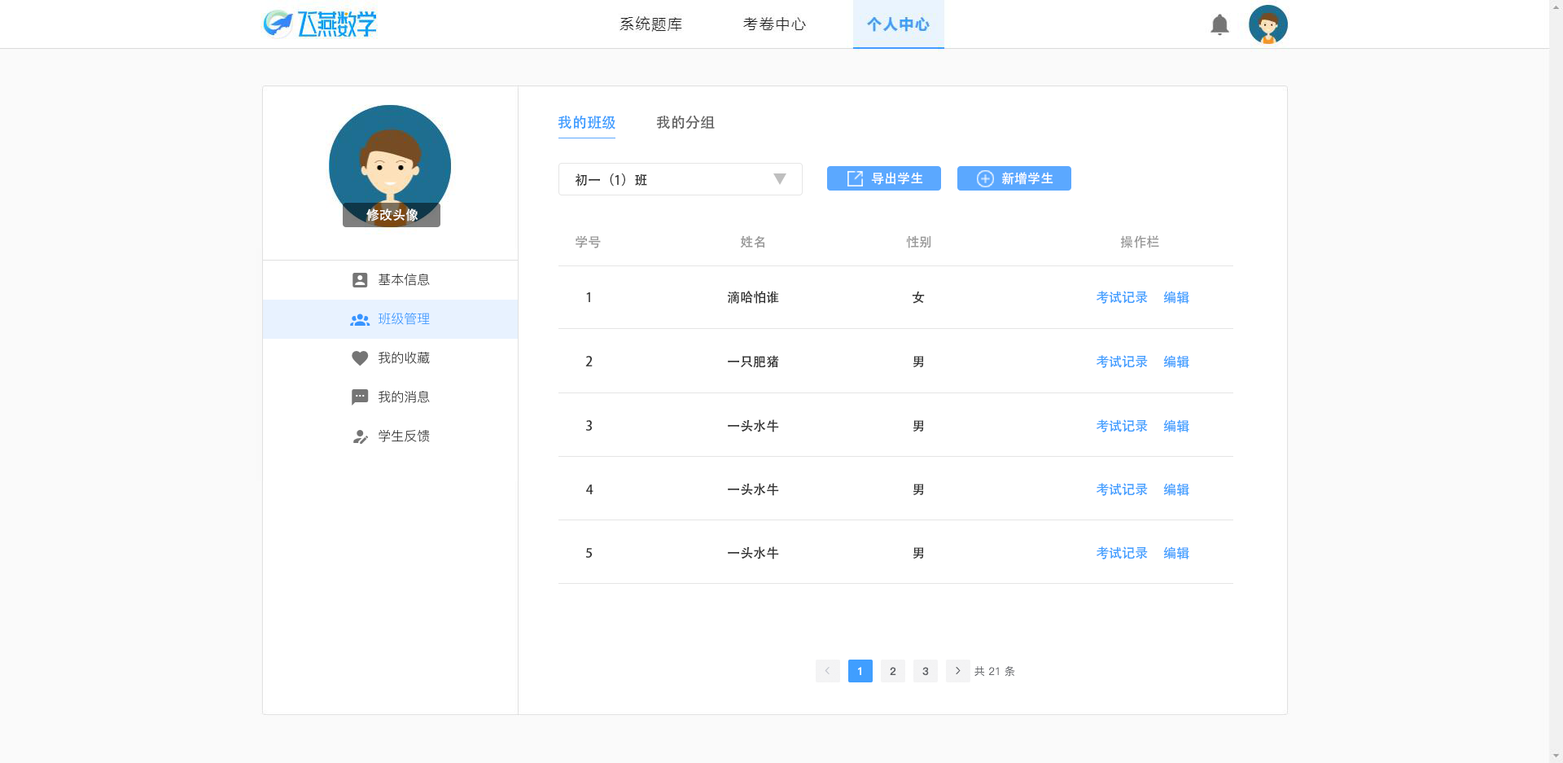
<style>
.page{position:relative;width:1563px;height:763px;background:#ffffff}
.page>*{position:absolute;margin:0}
.t1{font:14.7px "AdobeHeitiStd-Regular";color:#409eff}
.t2{font:14.7px "AdobeHeitiStd-Regular";color:#666666}
.t3{font:13px "AdobeHeitiStd-Regular";color:#333333}
.t4{font:13px "AdobeHeitiStd-Regular";color:#ffffff}
.t5{font:13px "AdobeHeitiStd-Regular";color:#999999}
.t6{font:13px "AdobeHeitiStd-Regular";color:#409eff}
</style>
<div class="page">
<p class="t1" style="left:558px;top:115px;width:57px;height:14px">我的班级</p>
<p class="t2" style="left:656px;top:115px;width:59px;height:14px">我的分组</p>
<p class="t3" style="left:576px;top:173px;width:71px;height:13px">初一（1）班</p>
<p class="t4" style="left:871px;top:172px;width:52px;height:13px">导出学生</p>
<p class="t4" style="left:1001px;top:172px;width:52px;height:13px">新增学生</p>
<p class="t4" style="left:366px;top:208px;width:52px;height:13px">修改头像</p>
<p class="t5" style="left:576px;top:235px;width:25px;height:13px">学号</p>
<p class="t5" style="left:740px;top:235px;width:25px;height:13px">姓名</p>
<p class="t5" style="left:906px;top:235px;width:25px;height:13px">性别</p>
<p class="t5" style="left:1120px;top:235px;width:39px;height:13px">操作栏</p>
<p class="t3" style="left:586px;top:292px;width:4px;height:10px">1</p>
<p class="t3" style="left:727px;top:291px;width:52px;height:13px">滴哈怕谁</p>
<p class="t3" style="left:912px;top:291px;width:13px;height:13px">女</p>
<p class="t6" style="left:1096px;top:291px;width:52px;height:13px">考试记录</p>
<p class="t6" style="left:1163px;top:291px;width:26px;height:13px">编辑</p>
<p class="t3" style="left:585px;top:356px;width:8px;height:10px">2</p>
<p class="t3" style="left:728px;top:355px;width:51px;height:13px">一只肥猪</p>
<p class="t3" style="left:913px;top:356px;width:11px;height:11px">男</p>
<p class="t6" style="left:1096px;top:355px;width:52px;height:13px">考试记录</p>
<p class="t6" style="left:1163px;top:355px;width:26px;height:13px">编辑</p>
<p class="t3" style="left:585px;top:420px;width:8px;height:11px">3</p>
<p class="t3" style="left:728px;top:419px;width:51px;height:13px">一头水牛</p>
<p class="t3" style="left:913px;top:420px;width:11px;height:11px">男</p>
<p class="t6" style="left:1096px;top:419px;width:52px;height:13px">考试记录</p>
<p class="t6" style="left:1163px;top:419px;width:26px;height:13px">编辑</p>
<p class="t3" style="left:586px;top:484px;width:8px;height:10px">4</p>
<p class="t3" style="left:728px;top:483px;width:51px;height:13px">一头水牛</p>
<p class="t3" style="left:913px;top:484px;width:11px;height:11px">男</p>
<p class="t6" style="left:1096px;top:483px;width:52px;height:13px">考试记录</p>
<p class="t6" style="left:1163px;top:483px;width:26px;height:13px">编辑</p>
<p class="t3" style="left:585px;top:548px;width:8px;height:10px">5</p>
<p class="t3" style="left:728px;top:546px;width:51px;height:13px">一头水牛</p>
<p class="t3" style="left:913px;top:547px;width:11px;height:11px">男</p>
<p class="t6" style="left:1096px;top:546px;width:52px;height:13px">考试记录</p>
<p class="t6" style="left:1163px;top:546px;width:26px;height:13px">编辑</p>
</div>
